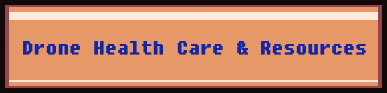
<style>
.page{position:relative;width:387px;height:93px;background:#e79869}
.page>*{position:absolute;margin:0}
.t1{font:22.7px "DungGeunMo";color:#0e27a5;font-weight:bold}
</style>
<div class="page">
<p class="t1" style="left:23px;top:41px;width:343px;height:14px">Drone Health Care &amp; Resources</p>
<p class="t1" style="left:23px;top:41px;width:343px;height:14px">Drone Health Care &amp; Resources</p>
</div>
